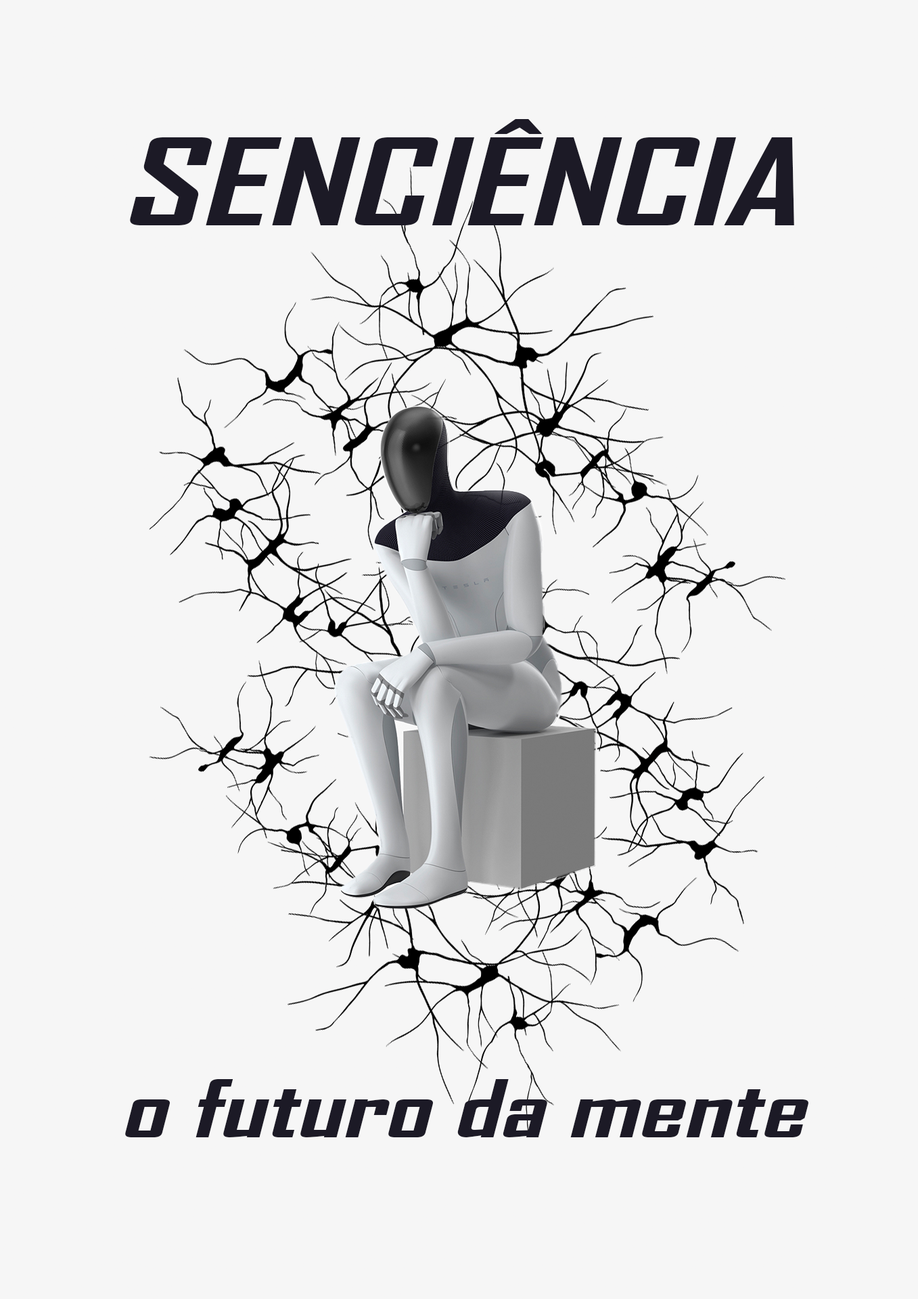
<style>
.page{position:relative;width:918px;height:1299px;background:#f6f6f6}
.page>*{position:absolute;margin:0}
.t1{font:115px "AgencyFB-Bold";color:#1c1a26;font-style:italic;scale:1.47 1}
.t2{font:76.7px "AgencyFB-Bold";color:#1c1a26;font-style:italic;scale:1.47 1}
</style>
<div class="page">
<p class="t1" style="left:130px;top:119px;width:664px;height:106px">SENCIÊNCIA</p>
<p class="t2" style="left:125px;top:1079px;width:683px;height:58px">o futuro da mente</p>
</div>
